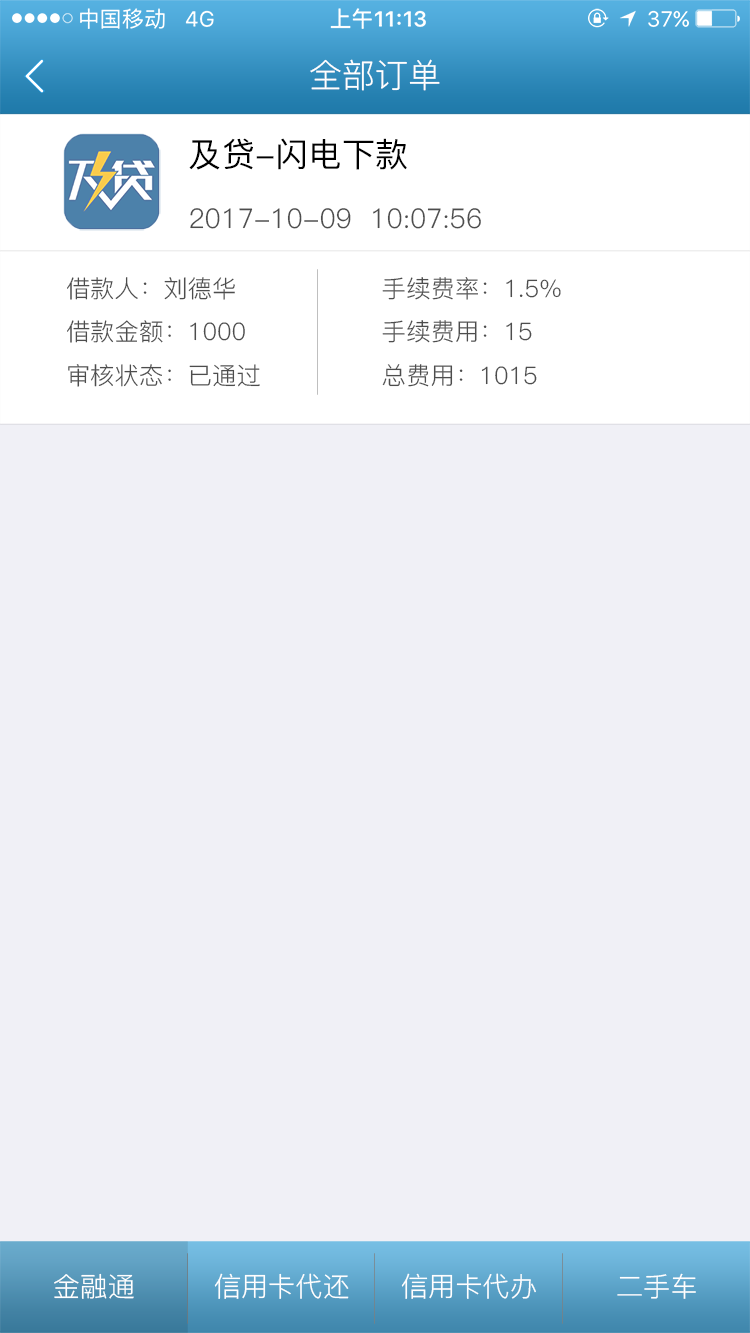
<style>
.page{position:relative;width:750px;height:1333px;background:#f0f0f6}
.page>*{position:absolute;margin:0}
.t1{font:33.3px "PingFang-SC-Regular";color:#ffffff}
.t2{font:33.2px "PingFang-SC-Medium";color:#000000}
.t3{font:27.2px "PingFang-SC-Regular";color:#4d4d4d}
.t4{font:24.1px/43.5px "PingFang-SC-Regular";color:#4d4d4d}
.t5{font:27.2px "PingFang-SC-Regular";color:#ffffff}
</style>
<div class="page">
<p class="t1" style="left:310px;top:59px;width:130px;height:32px">全部订单</p>
<p class="t2" style="left:189px;top:138px;width:218px;height:32px">及贷-闪电下款</p>
<p class="t3" style="left:190px;top:208px;width:291px;height:21px">2017-10-09  10:07:56</p>
<p class="t4" style="left:67px;top:277px;width:193px;height:110px">借款人：刘德华<br>借款金额：1000<br>审核状态：已通过</p>
<p class="t4" style="left:382px;top:277px;width:179px;height:110px">手续费率：1.5%<br>手续费用：15<br>总费用：1015</p>
<p class="t5" style="left:54px;top:1273px;width:80px;height:26px">金融通</p>
<p class="t5" style="left:214px;top:1273px;width:135px;height:26px">信用卡代还</p>
<p class="t5" style="left:401px;top:1273px;width:135px;height:26px">信用卡代办</p>
<p class="t5" style="left:617px;top:1273px;width:79px;height:26px">二手车</p>
</div>
